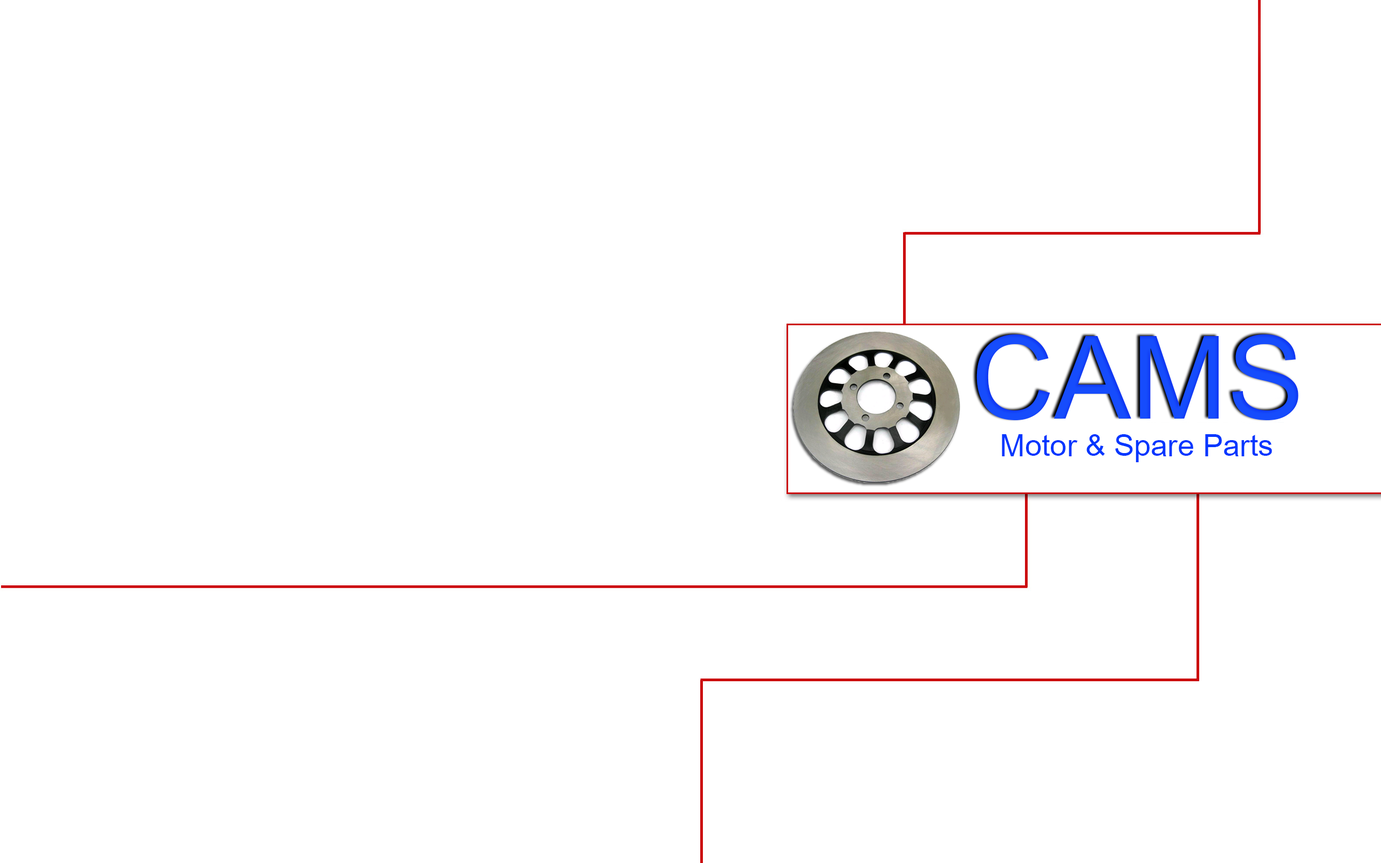
<style>
.page{position:relative;width:1381px;height:863px;background:#ffffff}
.page>*{position:absolute;margin:0}
.t1{font:115.5px "DokChampa";color:#164cfc}
.t2{font:30.2px "DokChampa";color:#0036ff}
</style>
<div class="page">
<p class="t1" style="left:977px;top:335px;width:322px;height:85px">CAMS</p>
<p class="t2" style="left:1002px;top:434px;width:270px;height:28px">Motor &amp; Spare Parts</p>
</div>
